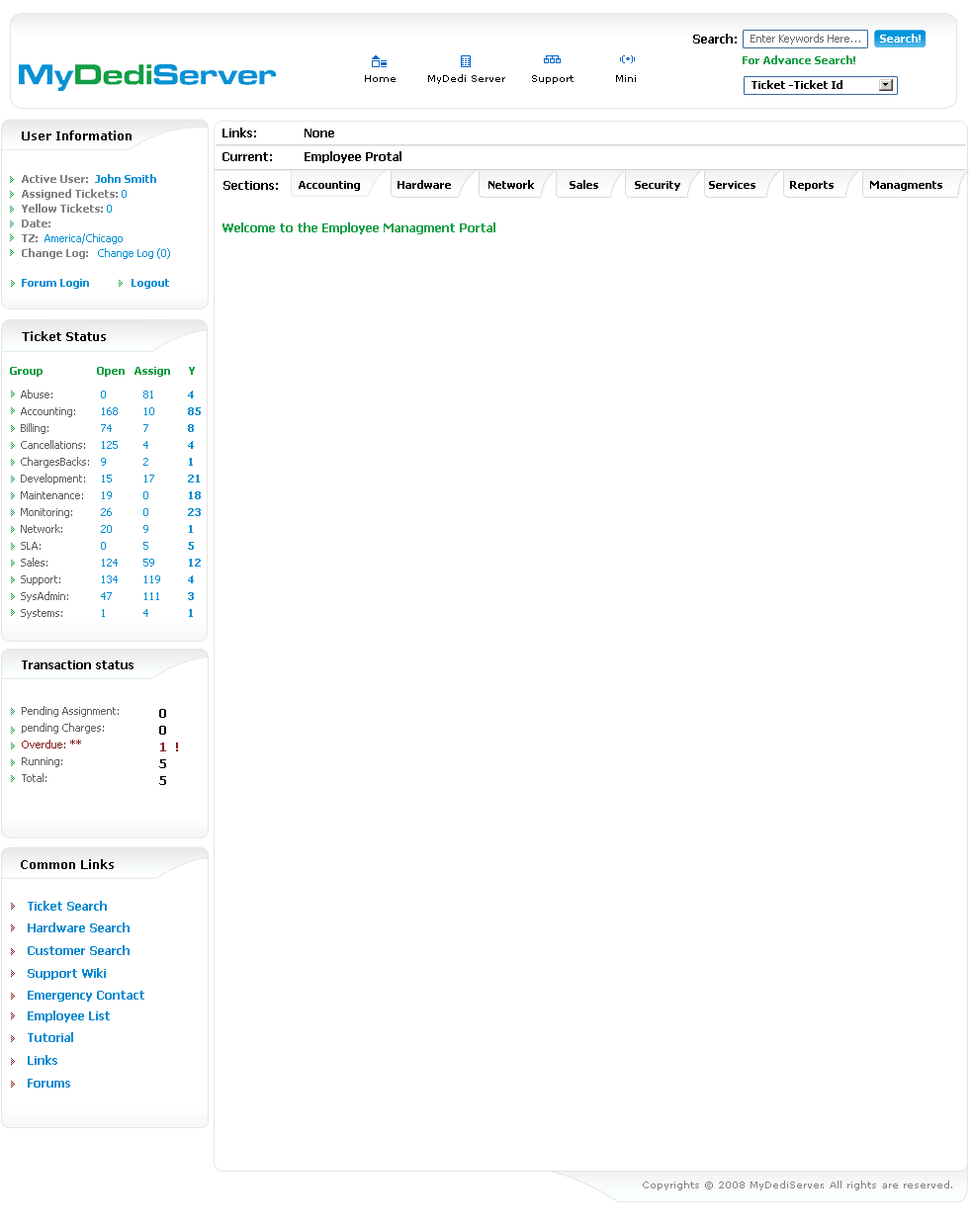
<style>
.page{position:relative;width:973px;height:1226px;background:#ffffff}
.page>*{position:absolute;margin:0}
.t1{font:11.9px "Tahoma-Bold";color:#000000}
.t2{font:10.9px "Tahoma";color:#6a6969}
.t3{font:10.9px "Tahoma-Bold";color:#ffffff}
.t4{font:10.9px "Tahoma-Bold";color:#139f46}
.t5{font:9.9px "Verdana";color:#000000}
.t6{font:10.9px "Tahoma-Bold";color:#000000}
.t7{font:11.9px "Verdana-Bold";color:#000000}
.t8{font:10.9px/14.8px "Tahoma-Bold";color:#848484}
.t9{font:10.9px/14.8px "Tahoma-Bold";color:#0990d4}
.t10{font:10.9px/14.8px "Tahoma";color:#0a91d4}
.t11{font:10.9px/14.8px "Tahoma-Bold";color:#028dd3}
.t12{font:10.9px/14.8px "Tahoma-Bold";color:#038ed3}
.t13{font:11.9px "Tahoma-Bold";color:#139f46}
.t14{font:10.9px "Tahoma-Bold";color:#0d9c41}
.t15{font:10.9px/16.8px "Tahoma";color:#606060}
.t16{font:10.9px/16.8px "Tahoma";color:#028dd3}
.t17{font:10.9px/16.8px "Tahoma-Bold";color:#028dd3}
.t18{font:10.9px/16.8px "Tahoma";color:#861b1b}
.t19{font:11.9px/16.8px "Tahoma-Bold";color:#861b1b}
.t20{font:11.9px/16.8px "Tahoma-Bold";color:#000000}
.t21{font:11.9px/22.4px "Tahoma-Bold";color:#008ad1}
.t22{font:9.9px "Verdana";color:#848484}
</style>
<div class="page">
<p class="t1" style="left:693px;top:34px;width:43px;height:9px">Search:</p>
<p class="t2" style="left:750px;top:34px;width:110px;height:10px">Enter Keywords Here...</p>
<p class="t3" style="left:880px;top:34px;width:40px;height:9px">Search!</p>
<p class="t4" style="left:742px;top:55px;width:113px;height:9px">For Advance Search!</p>
<p class="t5" style="left:365px;top:75px;width:30px;height:7px">Home</p>
<p class="t5" style="left:428px;top:74px;width:77px;height:10px">MyDedi Server</p>
<p class="t5" style="left:532px;top:75px;width:41px;height:9px">Support</p>
<p class="t5" style="left:616px;top:75px;width:20px;height:7px">Mini</p>
<p class="t6" style="left:751px;top:80px;width:91px;height:9px">Ticket -Ticket Id</p>
<p class="t7" style="left:22px;top:130px;width:109px;height:10px">User Information</p>
<p class="t1" style="left:222px;top:128px;width:112px;height:9px">Links:            None</p>
<p class="t1" style="left:222px;top:151px;width:179px;height:12px">Current:        Employee Protal</p>
<p class="t8" style="left:22px;top:174px;width:148px;height:115px">Active User:  <span class="t9">John Smith<br></span>Assigned Tickets: <span class="t10">0<br></span>Yellow Tickets: <span class="t10">0<br></span>Date:<br>TZ: <span class="t10"> America/Chicago<br></span>Change Log:   <span class="t10">Change Log (0)<br><br></span><span class="t11">Forum Login              </span><span class="t12">Logout</span></p>
<p class="t1" style="left:223px;top:181px;width:55px;height:9px">Sections:</p>
<p class="t6" style="left:299px;top:181px;width:61px;height:10px">Accounting</p>
<p class="t6" style="left:397px;top:180px;width:54px;height:9px">Hardware</p>
<p class="t6" style="left:488px;top:180px;width:46px;height:9px">Network</p>
<p class="t6" style="left:569px;top:180px;width:29px;height:9px">Sales</p>
<p class="t6" style="left:635px;top:181px;width:45px;height:10px">Security</p>
<p class="t6" style="left:709px;top:181px;width:46px;height:8px">Services</p>
<p class="t6" style="left:790px;top:181px;width:43px;height:10px">Reports</p>
<p class="t6" style="left:870px;top:181px;width:72px;height:10px">Managments</p>
<p class="t13" style="left:222px;top:222px;width:273px;height:12px">Welcome to the Employee Managment Portal</p>
<p class="t7" style="left:22px;top:331px;width:84px;height:10px">Ticket Status</p>
<p class="t14" style="left:10px;top:367px;width:185px;height:10px">Group                  Open   Assign      Y</p>
<p class="t15" style="left:21px;top:389px;width:68px;height:230px">Abuse:<br>Accounting:<br>Billing:<br>Cancellations:<br>ChargesBacks:<br>Development:<br>Maintenance:<br>Monitoring:<br>Network:<br>SLA:<br>Sales:<br>Support:<br>SysAdmin:<br>Systems:</p>
<p class="t16" style="left:101px;top:390px;width:17px;height:227px">0<br>168<br>74<br>125<br>9<br>15<br>19<br>26<br>20<br>0<br>124<br>134<br>47<br>1</p>
<p class="t16" style="left:143px;top:390px;width:17px;height:227px">81<br>10<br>7<br>4<br>2<br>17<br>0<br>0<br>9<br>5<br>59<br>119<br>111<br>4</p>
<p class="t17" style="left:188px;top:390px;width:13px;height:227px">4<br>85<br>8<br>4<br>1<br>21<br>18<br>23<br>1<br>5<br>12<br>4<br>3<br>1</p>
<p class="t15" style="left:22px;top:660px;width:111px;height:122px"><span class="t1">Transaction status<br><br><br></span>Pending Assignment:<br>pending Charges:<br><span class="t18">Overdue: **<br></span>Running:<br>Total:</p>
<p class="t19" style="left:159px;top:709px;width:19px;height:76px"><span class="t20">0<br>0<br></span>1  ! <br><span class="t20">5<br>5</span></p>
<p class="t7" style="left:21px;top:859px;width:93px;height:10px">Common Links</p>
<p class="t21" style="left:28px;top:901px;width:116px;height:100px">Ticket Search<br>Hardware Search<br>Customer Search<br>Support Wiki<br>Emergency Contact</p>
<p class="t21" style="left:28px;top:1010px;width:82px;height:77px">Employee List<br>Tutorial<br>Links<br>Forums</p>
<p class="t22" style="left:643px;top:1180px;width:309px;height:10px">Copyrights © 2008 MyDediServer. All rights are reserved.</p>
</div>
